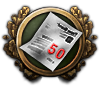
<style>
.page{position:relative;width:100px;height:87px;background:#ffffff}
.page>*{position:absolute;margin:0}
.t1{font:16px "FranklinGothic-DemiCond";letter-spacing:0.075em}
</style>
<div class="page">
<p class="t1" style="left:47px;top:43px;width:18px;height:16px;rotate:34deg">50</p>
</div>
